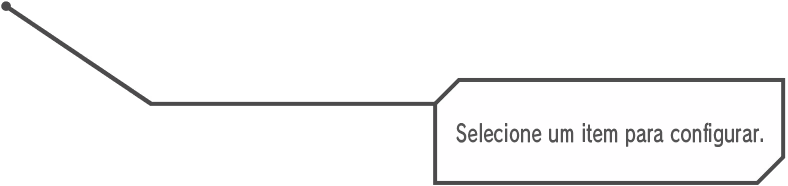
<style>
.page{position:relative;width:788px;height:186px;background:#ffffff}
.page>*{position:absolute;margin:0}
.t1{font:24px "RodinPro-DB";letter-spacing:0.018em;color:#555455;scale:0.72 1}
</style>
<div class="page">
<p class="t1" style="left:456px;top:122px;width:307px;height:25px">Selecione um item para configurar.</p>
</div>
